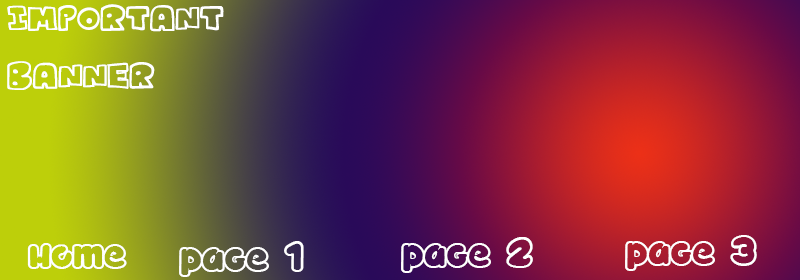
<style>
.page{position:relative;width:800px;height:280px}
.page>*{position:absolute;margin:0}
.t1{font:48px "Kartoons";color:#ffffff}
.t2{font:25px "TOYZARUX";color:#ffffff}
</style>
<div class="page">
<p class="t1" style="left:7px;top:4px;width:217px;height:86px">Important<br>Banner</p>
<p class="t2" style="left:27px;top:243px;width:100px;height:26px">Home</p>
<p class="t2" style="left:179px;top:241px;width:125px;height:36px">Page 1</p>
<p class="t2" style="left:401px;top:237px;width:132px;height:36px">Page 2</p>
<p class="t2" style="left:625px;top:235px;width:132px;height:36px">Page 3</p>
</div>
